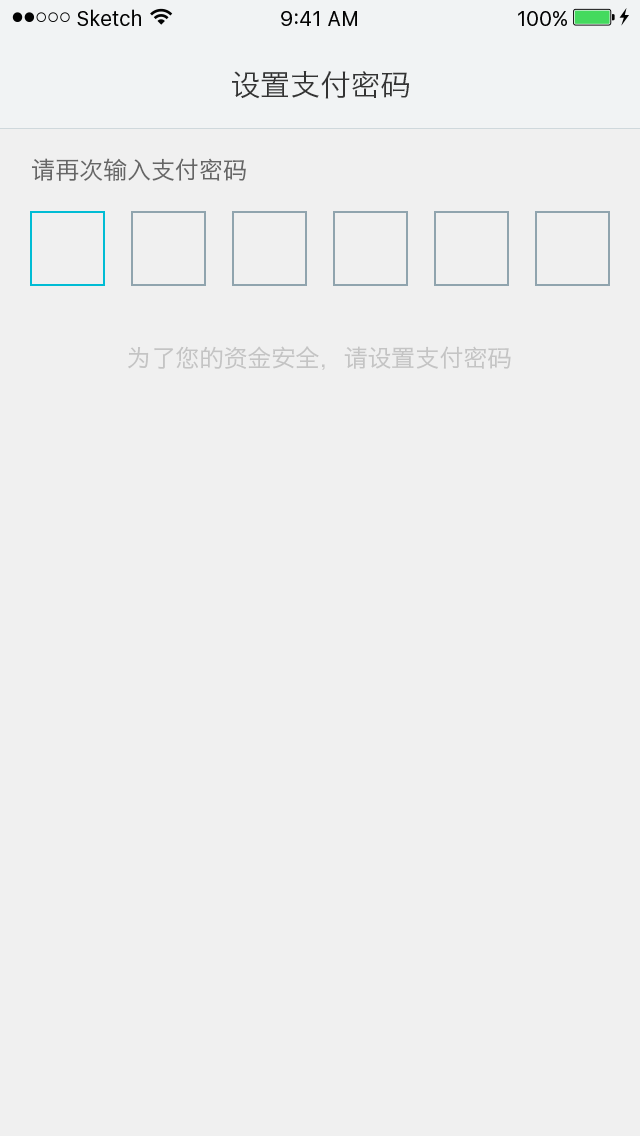
<style>
.page{position:relative;width:640px;height:1136px;background:#f0f0f0}
.page>*{position:absolute;margin:0}
.t1{font:30px "HiraginoSansGB-W3";color:#333333}
.t2{font:24px "HiraginoSansGB-W3";color:#666666}
.t3{font:24px "HiraginoSansGB-W3";color:#c4c4c4}
</style>
<div class="page">
<p class="t1" style="left:232px;top:71px;width:177px;height:28px">设置支付密码</p>
<p class="t2" style="left:32px;top:158px;width:214px;height:23px">请再次输入支付密码</p>
<p class="t3" style="left:128px;top:346px;width:383px;height:24px">为了您的资金安全，请设置支付密码</p>
</div>
